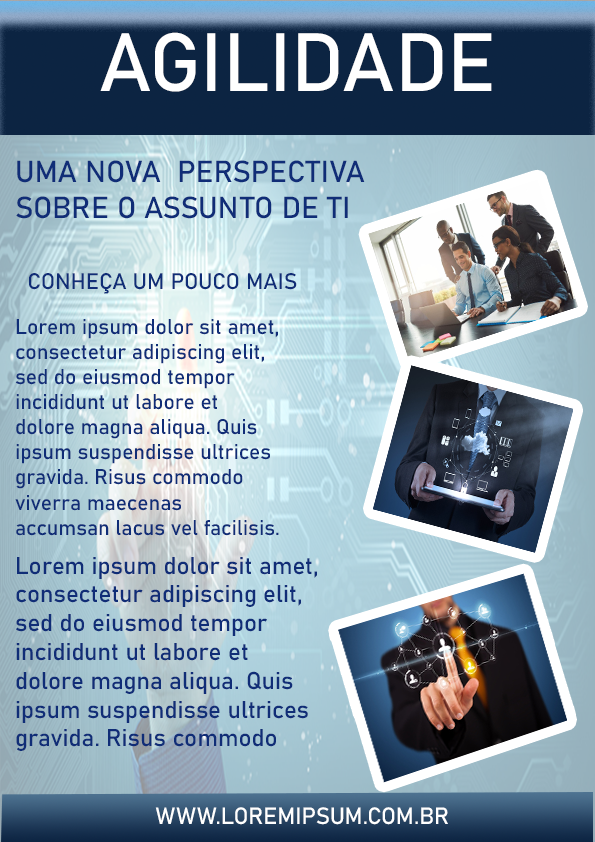
<style>
.page{position:relative;width:595px;height:842px}
.page>*{position:absolute;margin:0}
.t1{font:81.1px "Bahnschrift";color:#ffffff}
.t2{font:30px "Bahnschrift";color:#102d77}
.t3{font:22.3px "Bahnschrift";color:#102d77}
.t4{font:20.9px "Bahnschrift";color:#102d77}
.t5{font:24px "Bahnschrift";color:#102d77}
.t6{font:23.2px "Bahnschrift";color:#ffffff}
</style>
<div class="page">
<p class="t1" style="left:100px;top:32px;width:392px;height:60px">AGILIDADE</p>
<p class="t2" style="left:16px;top:160px;width:349px;height:59px">UMA NOVA  PERSPECTIVA<br>SOBRE O ASSUNTO DE TI</p>
<p class="t3" style="left:29px;top:273px;width:268px;height:21px">CONHEÇA UM POUCO MAIS</p>
<p class="t4" style="left:15px;top:319px;width:264px;height:217px">Lorem ipsum dolor sit amet, consectetur adipiscing elit, sed do eiusmod tempor incididunt ut labore et dolore magna aliqua. Quis ipsum suspendisse ultrices gravida. Risus commodo viverra maecenas accumsan lacus vel facilisis.</p>
<p class="t5" style="left:16px;top:557px;width:301px;height:194px">Lorem ipsum dolor sit amet, consectetur adipiscing elit, sed do eiusmod tempor incididunt ut labore et dolore magna aliqua. Quis ipsum suspendisse ultrices gravida. Risus commodo viverra maecenas accumsan lacus vel facilisis.</p>
<p class="t6" style="left:155px;top:807px;width:293px;height:18px">WWW.LOREMIPSUM.COM.BR</p>
</div>
